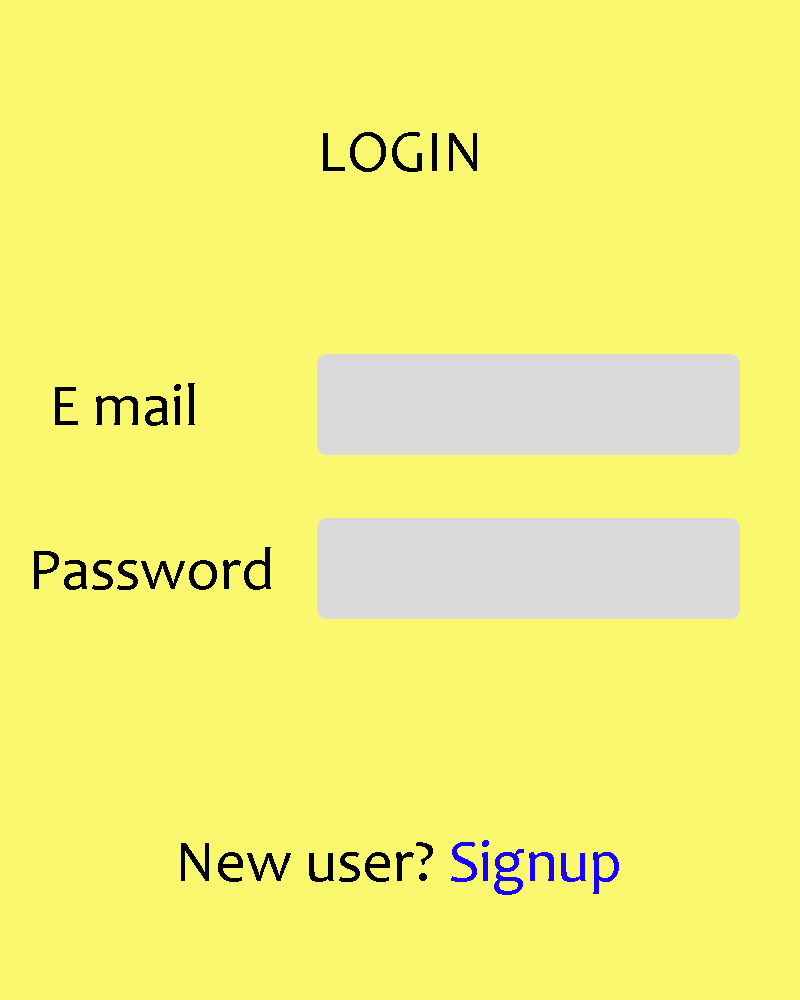
<style>
.page{position:relative;width:800px;height:1000px;background:#f9f86e}
.page>*{position:absolute;margin:0}
.t1{font:60px "Candara";color:#010101}
.t2{font:60px "Candara";color:#000000}
.t3{font:60px "Candara";color:#1800ff}
</style>
<div class="page">
<p class="t1" style="left:323px;top:132px;width:154px;height:40px">LOGIN</p>
<p class="t2" style="left:55px;top:383px;width:140px;height:43px">E mail</p>
<p class="t2" style="left:34px;top:547px;width:237px;height:43px">Password</p>
<p class="t2" style="left:181px;top:840px;width:438px;height:55px">New user? <span class="t3">Signup</span></p>
</div>
